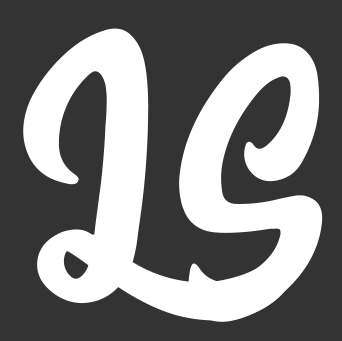
<style>
.page{position:relative;width:342px;height:341px;background:#333333}
.page>*{position:absolute;margin:0}
.t1{font:345px "BlackletterRegular";color:#ffffff}
.t2{font:345.2px "BlackletterRegular";color:#ffffff}
</style>
<div class="page">
<p class="t1" style="left:23px;top:28px;width:269px;height:293px;rotate:-15deg">L</p>
<p class="t2" style="left:179px;top:43px;width:144px;height:279px;rotate:-15deg">S</p>
</div>
